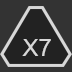
<style>
.page{position:relative;width:72px;height:72px;background:#333333}
.page>*{position:absolute;margin:0}
.t1{font:24px "ArialMT";color:#d8d8d8;font-variant:small-caps}
</style>
<div class="page">
<p class="t1" style="left:22px;top:39px;width:29px;height:17px">X7</p>
</div>
